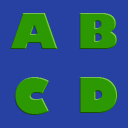
<style>
.page{position:relative;width:128px;height:128px;background:#2741a3}
.page>*{position:absolute;margin:0}
.t1{font:48px "GillSans-UltraBold";letter-spacing:0.05em;color:#2c9902}
</style>
<div class="page">
<p class="t1" style="left:10px;top:13px;width:48px;height:36px">A</p>
<p class="t1" style="left:79px;top:13px;width:38px;height:36px">B</p>
<p class="t1" style="left:14px;top:77px;width:35px;height:38px">C</p>
<p class="t1" style="left:79px;top:77px;width:38px;height:36px">D</p>
</div>
